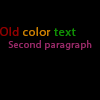
<style>
.page{position:relative;width:100px;height:100px;background:#000000}
.page>*{position:absolute;margin:0}
.t1{font:10px "MyriadPro-Regular";letter-spacing:0.05em;color:#912a64}
.t2{font:12px "MyriadPro-Regular";letter-spacing:0.05em;color:#910000}
.t3{font:12px "MyriadPro-Regular";letter-spacing:0.05em;color:#c98002}
.t4{font:12px "MyriadPro-Regular";letter-spacing:0.05em;color:#128f04}
</style>
<div class="page">
<p class="t1" style="left:0px;top:27px;width:92px;height:23px"><span class="t2">Old </span><span class="t3">color</span><span class="t4"> text<br></span>Second paragraph</p>
</div>
